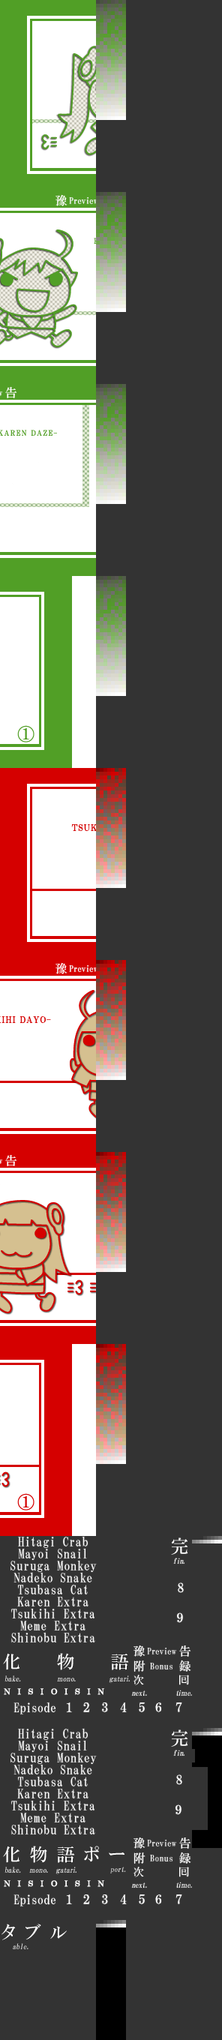
<style>
.page{position:relative;width:222px;height:2040px;background:#333333}
.page>*{position:absolute;margin:0}
.t1{font:12.8px/12px "HGMinchoB";letter-spacing:0.025em;color:#ffffff}
.t2{font:7.5px "HGMinchoB";letter-spacing:-0.05em;color:#ffffff;font-style:italic}
.t3{font:12.8px/30px "HGMinchoB";letter-spacing:0.4em;color:#ffffff}
.t4{font:12.8px/30px "HGMinchoB";letter-spacing:-0.45em;color:#ffffff}
.t5{font:9px "HGMinchoB";letter-spacing:-0.025em;color:#ffffff}
.t6{font:9px "HGMinchoB";letter-spacing:0.005em;color:#ffffff}
.t7{font:9px "HGMinchoB";letter-spacing:0.025em;color:#ffffff}
.t8{font:7.5px "HGMinchoB";letter-spacing:-0.2em;color:#ffffff;font-style:italic}
.t9{font:7.5px "HGMinchoB";letter-spacing:-0.1em;color:#ffffff;font-style:italic}
.t10{font:7.5px "HGMinchoB";letter-spacing:-0.05em;color:#ffffff;font-style:italic;scale:0.9 1}
.t11{font:12.8px "HGMinchoB";color:#ffffff}
.t12{font:12.8px "HGMinchoB";letter-spacing:0.2em;color:#ffffff}
.t13{font:12.8px "HGMinchoB";letter-spacing:0.1em;color:#ffffff}
.t14{font:12.8px "HGMinchoB";letter-spacing:0.25em;color:#ffffff}
.t15{font:9px "HGMinchoB";color:#ffffff}
.t16{font:7.5px "HGMinchoB";letter-spacing:-0.025em;color:#dedede;font-style:italic}
</style>
<div class="page">
<p class="t1" style="left:10px;top:1536px;width:87px;height:106px;text-align:center">Hitagi Crab<br>Mayoi Snail<br>Suruga Monkey<br>Nadeko Snake<br>Tsubasa Cat<br>Karen Extra<br>Tsukihi Extra<br>Meme Extra<br>Shinobu Extra</p>
<p class="t2" style="left:173px;top:1558px;width:11px;height:6px">fin.</p>
<p class="t3" style="left:177px;top:1582px;width:7px;height:41px"><span class="t4"> </span>8<br>9</p>
<p class="t5" style="left:147px;top:1648px;width:29px;height:6px">Previ<span class="t6">e</span>w</p>
<p class="t7" style="left:150px;top:1663px;width:22px;height:7px">Bonus</p>
<p class="t2" style="left:131px;top:1690px;width:61px;height:6px">next.        <span class="t8">t</span><span class="t9">i</span><span class="t10">ｍ</span>e.</p>
<p class="t11" style="left:14px;top:1702px;width:42px;height:12px">Episode</p>
<p class="t12" style="left:67px;top:1702px;width:115px;height:10px"><span class="t13">1 2 </span><span class="t14">3 4</span> 5 6 7</p>
<p class="t1" style="left:10px;top:1728px;width:87px;height:106px;text-align:center">Hitagi Crab<br>Mayoi Snail<br>Suruga Monkey<br>Nadeko Snake<br>Tsubasa Cat<br>Karen Extra<br>Tsukihi Extra<br>Meme Extra<br>Shinobu Extra</p>
<p class="t2" style="left:173px;top:1750px;width:11px;height:6px">fin.</p>
<p class="t3" style="left:176px;top:1774px;width:6px;height:41px"><span class="t4"> </span>8<br>9</p>
<p class="t5" style="left:147px;top:1840px;width:29px;height:6px">Previ<span class="t15">e</span>w</p>
<p class="t7" style="left:150px;top:1855px;width:22px;height:7px">Bonus</p>
<p class="t16" style="left:110px;top:1867px;width:16px;height:7px">port.</p>
<p class="t2" style="left:131px;top:1882px;width:61px;height:6px">next.        <span class="t8">t</span><span class="t9">i</span><span class="t10">ｍ</span>e.</p>
<p class="t11" style="left:14px;top:1894px;width:42px;height:12px">Episode</p>
<p class="t12" style="left:67px;top:1894px;width:115px;height:10px"><span class="t13">1 2 </span><span class="t14">3 4</span> 5 6 7</p>
<p class="t16" style="left:13px;top:1943px;width:15px;height:6px">able.</p>
</div>
